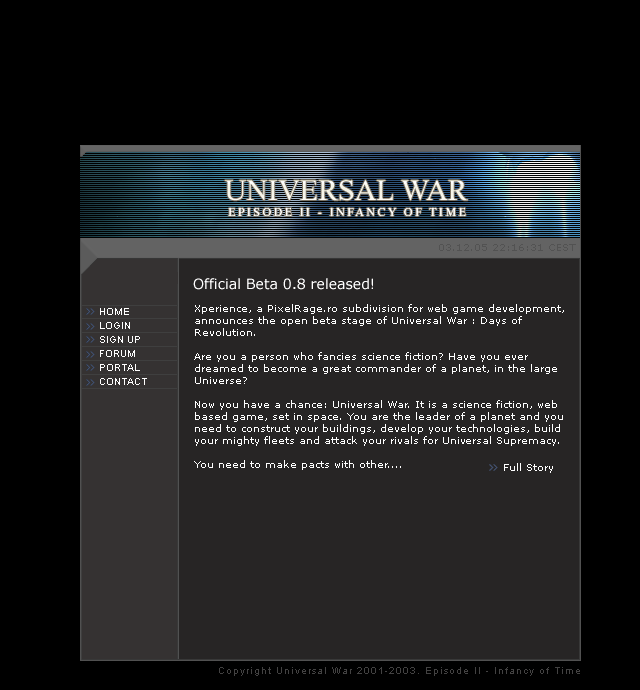
<style>
.page{position:relative;width:640px;height:690px;background:#000000}
.page>*{position:absolute;margin:0}
.t1{font:10px "Verdana";color:#525252}
.t2{font:14px "Verdana";color:#ffffff}
.t3{font:10px/12px "Verdana";color:#ffffff}
.t4{font:10px/14px "ArialMT";color:#ffffff}
.t5{font:10px "ArialMT";letter-spacing:0.1em;color:#434242}
</style>
<div class="page">
<p class="t1" style="left:439px;top:244px;width:137px;height:7px">03.12.05 22:16:31 CEST</p>
<p class="t2" style="left:193px;top:278px;width:180px;height:12px">Official Beta 0.8 released!</p>
<p class="t3" style="left:194px;top:304px;width:370px;height:166px">Xperience, a PixelRage.ro subdivision for web game development,<br>announces the open beta stage of Universal War : Days of<br>Revolution. <br><br>Are you a person who fancies science fiction? Have you ever<br>dreamed to become a great commander of a planet, in the large<br>Universe? <br><br>Now you have a chance: Universal War. It is a science fiction, web<br>based game, set in space. You are the leader of a planet and you<br>need to construct your buildings, develop your technologies, build<br>your mighty fleets and attack your rivals for Universal Supremacy.<br><br>You need to make pacts with other....</p>
<p class="t4" style="left:100px;top:308px;width:47px;height:77px">HOME<br>LOGIN<br>SIGN UP<br>FORUM<br>PORTAL<br>CONTACT</p>
<p class="t5" style="left:219px;top:667px;width:361px;height:9px">Copyright Universal War 2001-2003. Episode II - Infancy of Time</p>
</div>
